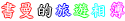
<style>
.page{position:relative;width:125px;height:21px;background:#ffffff}
.page>*{position:absolute;margin:0}
.t1{font:16px "DFKaiShu-SB-Estd-BF";color:#ffffff}
</style>
<div class="page">
<p class="t1" style="left:38px;top:4px;width:14px;height:13px">的</p>
<p class="t1" style="left:56px;top:4px;width:15px;height:12px">旅</p>
<p class="t1" style="left:91px;top:4px;width:14px;height:13px">相</p>
<p class="t1" style="left:110px;top:2px;width:14px;height:16px">簿</p>
</div>
